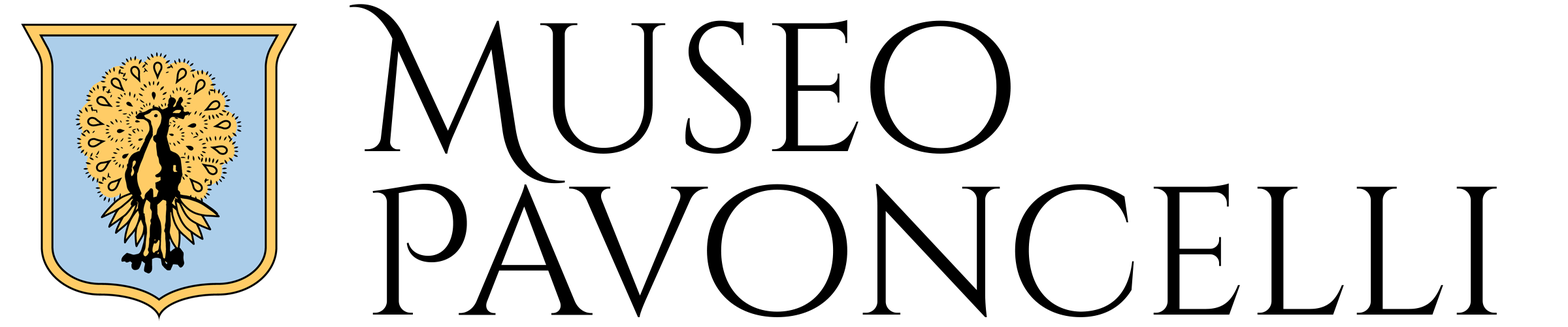
<style>
.page{position:relative;width:1568px;height:327px;background:#ffffff}
.page>*{position:absolute;margin:0}
.t1{font:182.4px/163.3px "CinzelDecorative-Regular";color:#000000}
</style>
<div class="page">
<p class="t1" style="left:350px;top:4px;width:1147px;height:313px">Museo<br>Pavoncelli</p>
</div>
